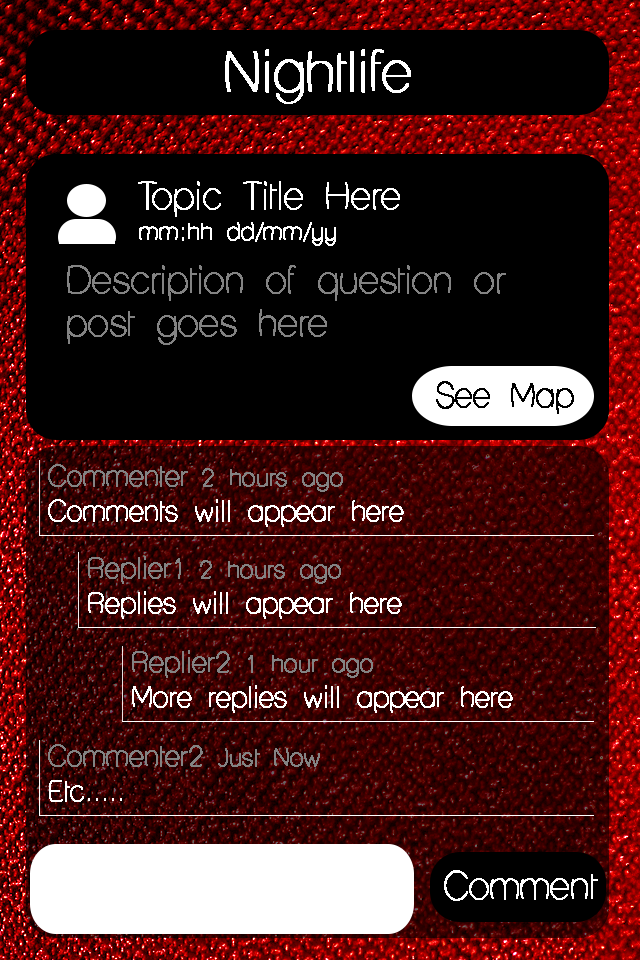
<style>
.page{position:relative;width:640px;height:960px;background:#000000}
.page>*{position:absolute;margin:0}
.t1{font:54.4px "LaneHumouresque";color:#ffffff;font-weight:bold}
.t2{font:36.2px "LaneHumouresque";color:#ffffff;font-weight:bold}
.t3{font:22.9px "LaneHumouresque";color:#ffffff;font-weight:bold}
.t4{font:36.2px "LaneHumouresque";color:#838383;font-weight:bold}
.t5{font:31.7px "LaneHumouresque";color:#000000;font-weight:bold}
.t6{font:22.7px "LaneHumouresque";color:#838383;font-weight:bold}
.t7{font:27.2px "LaneHumouresque";color:#838383;font-weight:bold}
.t8{font:27.1px "LaneHumouresque";color:#ffffff;font-weight:bold}
.t9{font:35.9px "LaneHumouresque";color:#ffffff;font-weight:bold}
</style>
<div class="page">
<p class="t1" style="left:225px;top:49px;width:186px;height:55px">Nightlife</p>
<p class="t2" style="left:138px;top:181px;width:262px;height:36px">Topic Title Here</p>
<p class="t3" style="left:139px;top:222px;width:197px;height:24px">mm:hh dd/mm/yy</p>
<p class="t4" style="left:67px;top:265px;width:439px;height:80px">Description of question or <br>post goes here</p>
<p class="t5" style="left:436px;top:381px;width:138px;height:33px">See Map</p>
<p class="t6" style="left:48px;top:464px;width:295px;height:28px"><span class="t7">Commenter</span> 2 hours ago</p>
<p class="t8" style="left:48px;top:499px;width:356px;height:28px">Comments will appear here</p>
<p class="t6" style="left:88px;top:556px;width:253px;height:28px"><span class="t7">Replier1</span> 2 hours ago</p>
<p class="t8" style="left:88px;top:591px;width:314px;height:28px">Replies will appear here</p>
<p class="t6" style="left:132px;top:650px;width:241px;height:28px"><span class="t7">Replier2</span> 1 hour ago</p>
<p class="t8" style="left:132px;top:685px;width:381px;height:28px">More replies will appear here</p>
<p class="t7" style="left:48px;top:744px;width:272px;height:23px">Commenter2<span class="t6"> Just Now</span></p>
<p class="t8" style="left:49px;top:780px;width:73px;height:22px">Etc.....</p>
<p class="t9" style="left:444px;top:870px;width:154px;height:31px">Comment</p>
</div>
